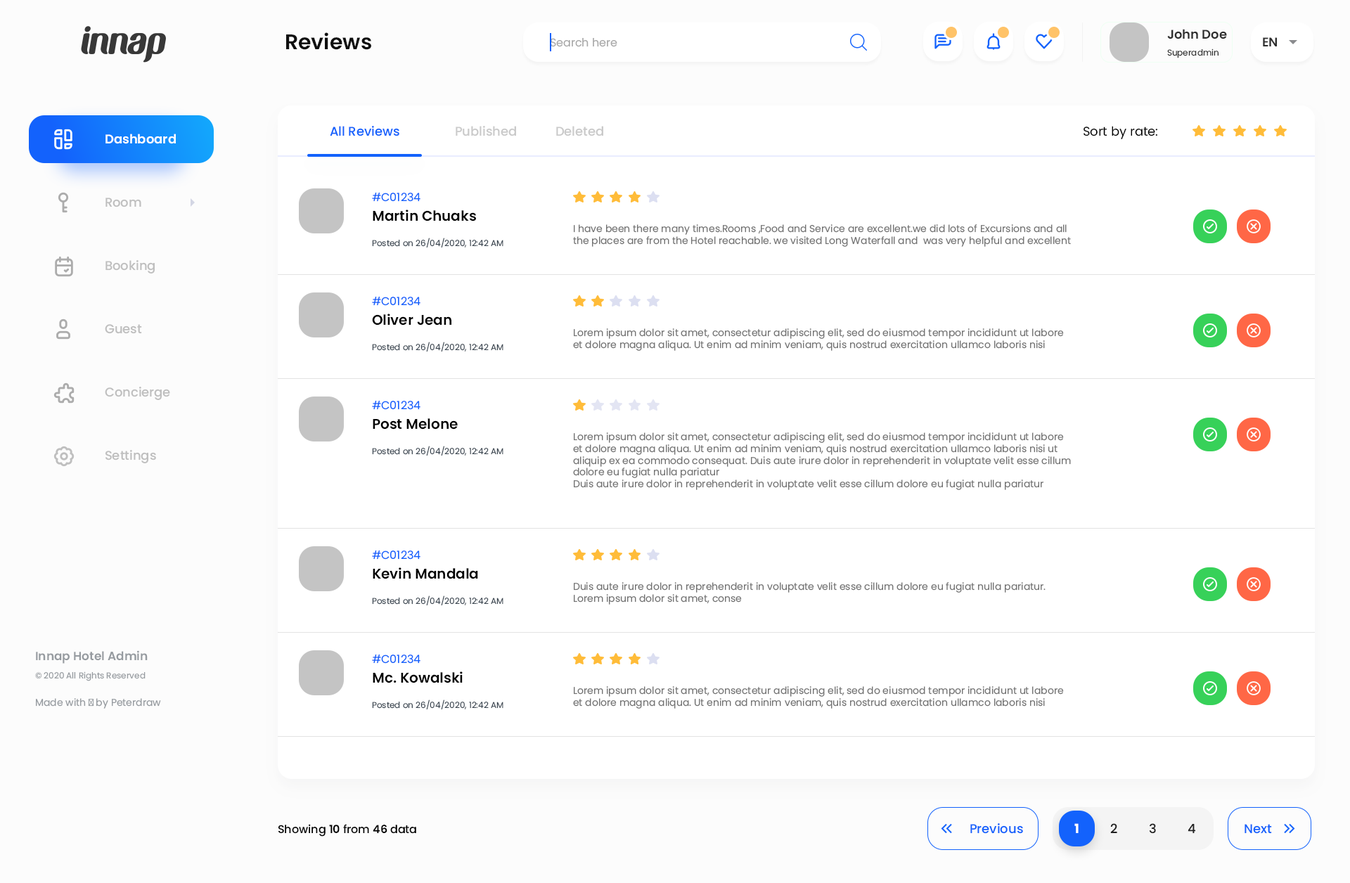
<style>
.page{position:relative;width:1350px;height:883px;background:#ffffff}
.page>*{position:absolute;margin:0}
.t1{font:12.7px "Poppins-SemiBold";color:#2e2e2e}
.t2{font:21.1px "Poppins-SemiBold";color:#0f0f0f}
.t3{font:11.3px "Poppins-Regular";color:#aaaaaa}
.t4{font:8.4px "Poppins-Regular";color:#2e2e2e}
.t5{font:12.7px "Poppins-Medium";color:#1362fc}
.t6{font:12.7px "Poppins-Medium";color:#cacaca}
.t7{font:12.7px "Poppins-Regular";color:#000000}
.t8{font:12.7px "Poppins-SemiBold";color:#ffffff}
.t9{font:12.7px "Poppins-Medium";color:#bfbfbf}
.t10{font:11.3px "Poppins-Regular";color:#1362fc}
.t11{font:14.1px "Poppins-SemiBold";color:#000000}
.t12{font:9.8px "Poppins-Regular";color:#737373}
.t13{font:8.4px "Poppins-Regular";color:#3e4954}
.t14{font:8.4px/18.3px "Poppins-Regular";color:#969ba0}
.t15{font:12px/18.3px "Poppins-SemiBold";color:#969ba0}
.t16{font:9.8px "Poppins-Regular";color:#969ba0}
.t17{font:11.3px "Poppins-Medium";color:#000000}
.t18{font:11.3px "Poppins-SemiBold";color:#000000}
.t19{font:12.7px "Poppins-Bold";color:#ffffff}
.t20{font:12.7px "Poppins-Medium";color:#202020}
</style>
<div class="page">
<p class="t1" style="left:1167px;top:29px;width:60px;height:10px">John Doe</p>
<p class="t2" style="left:286px;top:32px;width:85px;height:18px">Reviews</p>
<p class="t3" style="left:550px;top:38px;width:67px;height:9px">Search here</p>
<p class="t1" style="left:1263px;top:37px;width:14px;height:9px">EN</p>
<p class="t4" style="left:1167px;top:49px;width:52px;height:9px">Superadmin</p>
<p class="t5" style="left:330px;top:126px;width:69px;height:10px">All Reviews</p>
<p class="t6" style="left:456px;top:126px;width:60px;height:10px">Published</p>
<p class="t6" style="left:556px;top:126px;width:47px;height:10px">Deleted</p>
<p class="t7" style="left:1084px;top:126px;width:73px;height:13px">Sort by rate:</p>
<p class="t8" style="left:105px;top:134px;width:71px;height:10px">Dashboard</p>
<p class="t9" style="left:105px;top:198px;width:36px;height:9px">Room</p>
<p class="t10" style="left:372px;top:193px;width:49px;height:9px">#C01234</p>
<p class="t11" style="left:373px;top:210px;width:103px;height:12px">Martin Chuaks</p>
<p class="t12" style="left:573px;top:224px;width:498px;height:23px">I have been there many times.Rooms ,Food and Service are excellent.we did lots of Excursions and all the places are from the Hotel reachable. we visited Long Waterfall and  was very helpful and excellent</p>
<p class="t13" style="left:372px;top:238px;width:131px;height:10px">Posted on 26/04/2020, 12:42 AM</p>
<p class="t9" style="left:105px;top:260px;width:50px;height:14px">Booking</p>
<p class="t10" style="left:372px;top:297px;width:49px;height:9px">#C01234</p>
<p class="t11" style="left:372px;top:314px;width:79px;height:12px">Oliver Jean</p>
<p class="t9" style="left:105px;top:324px;width:37px;height:10px">Guest</p>
<p class="t12" style="left:573px;top:328px;width:491px;height:23px">Lorem ipsum dolor sit amet, consectetur adipiscing elit, sed do eiusmod tempor incididunt ut labore et dolore magna aliqua. Ut enim ad minim veniam, quis nostrud exercitation ullamco laboris nisi</p>
<p class="t13" style="left:372px;top:342px;width:131px;height:10px">Posted on 26/04/2020, 12:42 AM</p>
<p class="t9" style="left:105px;top:387px;width:65px;height:13px">Concierge</p>
<p class="t10" style="left:372px;top:401px;width:49px;height:9px">#C01234</p>
<p class="t11" style="left:373px;top:418px;width:85px;height:12px">Post Melone</p>
<p class="t12" style="left:573px;top:432px;width:498px;height:58px">Lorem ipsum dolor sit amet, consectetur adipiscing elit, sed do eiusmod tempor incididunt ut labore et dolore magna aliqua. Ut enim ad minim veniam, quis nostrud exercitation ullamco laboris nisi ut aliquip ex ea commodo consequat. Duis aute irure dolor in reprehenderit in voluptate velit esse cillum dolore eu fugiat nulla pariatur <br>Duis aute irure dolor in reprehenderit in voluptate velit esse cillum dolore eu fugiat nulla pariatur</p>
<p class="t13" style="left:372px;top:446px;width:131px;height:10px">Posted on 26/04/2020, 12:42 AM</p>
<p class="t9" style="left:105px;top:450px;width:51px;height:13px">Settings</p>
<p class="t10" style="left:372px;top:551px;width:49px;height:9px">#C01234</p>
<p class="t11" style="left:373px;top:567px;width:105px;height:12px">Kevin Mandala</p>
<p class="t12" style="left:574px;top:582px;width:472px;height:23px">Duis aute irure dolor in reprehenderit in voluptate velit esse cillum dolore eu fugiat nulla pariatur. Lorem ipsum dolor sit amet, conse</p>
<p class="t13" style="left:372px;top:596px;width:131px;height:10px">Posted on 26/04/2020, 12:42 AM</p>
<p class="t14" style="left:35px;top:650px;width:113px;height:31px"><span class="t15">Innap Hotel Admin<br></span>© 2020 All Rights Reserved</p>
<p class="t10" style="left:372px;top:655px;width:49px;height:9px">#C01234</p>
<p class="t11" style="left:373px;top:672px;width:90px;height:11px">Mc. Kowalski</p>
<p class="t12" style="left:573px;top:686px;width:491px;height:23px">Lorem ipsum dolor sit amet, consectetur adipiscing elit, sed do eiusmod tempor incididunt ut labore et dolore magna aliqua. Ut enim ad minim veniam, quis nostrud exercitation ullamco laboris nisi</p>
<p class="t16" style="left:36px;top:698px;width:125px;height:11px">Made with ♥ by Peterdraw</p>
<p class="t13" style="left:372px;top:700px;width:131px;height:10px">Posted on 26/04/2020, 12:42 AM</p>
<p class="t17" style="left:278px;top:824px;width:138px;height:13px">Showing <span class="t18">10 </span>from <span class="t18">46 </span>data</p>
<p class="t5" style="left:970px;top:823px;width:53px;height:11px">Previous</p>
<p class="t19" style="left:1074px;top:823px;width:5px;height:10px">1</p>
<p class="t20" style="left:1110px;top:823px;width:7px;height:10px">2</p>
<p class="t20" style="left:1149px;top:823px;width:7px;height:11px">3</p>
<p class="t20" style="left:1188px;top:823px;width:8px;height:11px">4</p>
<p class="t5" style="left:1245px;top:824px;width:27px;height:10px">Next</p>
</div>
